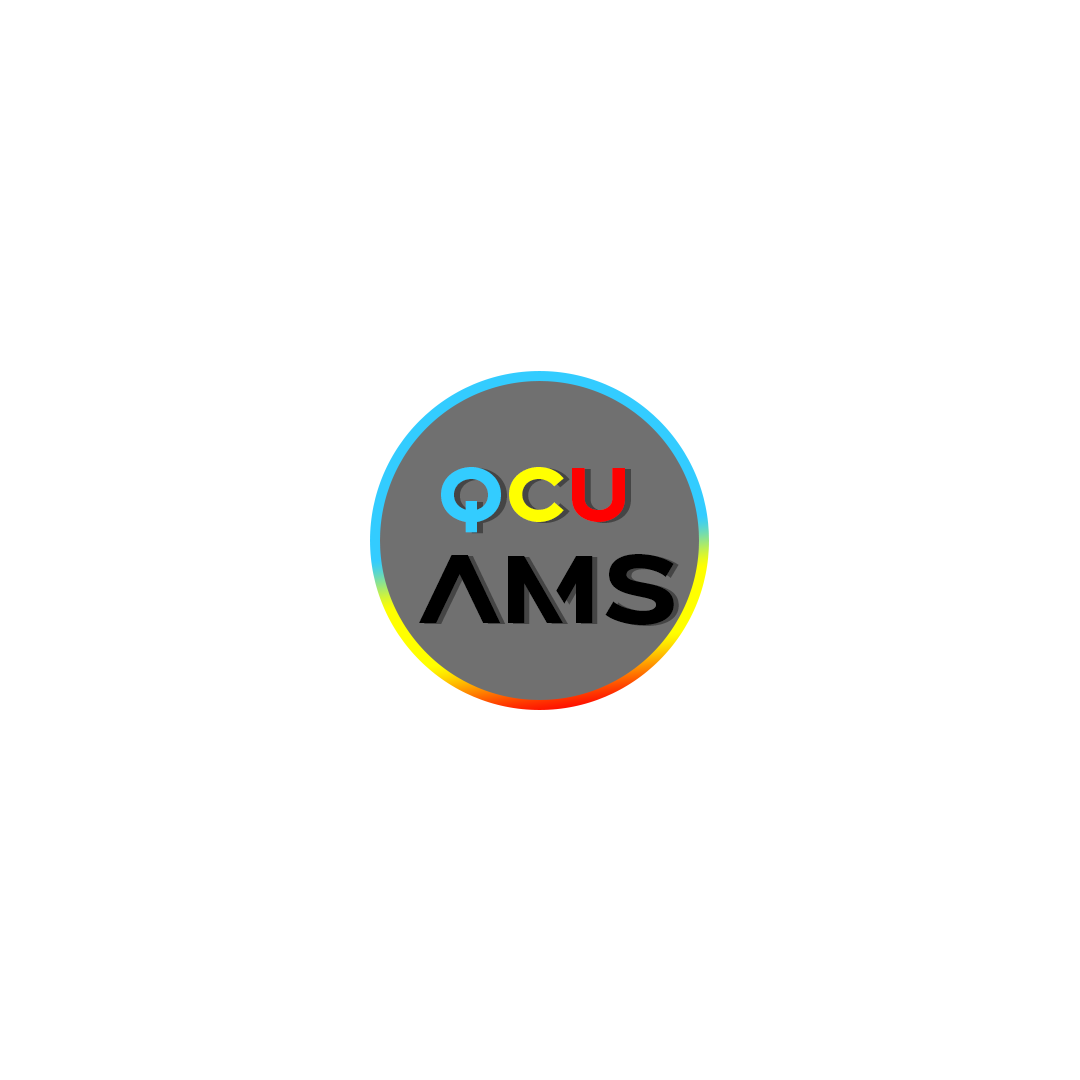
<style>
.page{position:relative;width:1080px;height:1080px;background:#ffffff}
.page>*{position:absolute;margin:0}
.t1{font:75px "Brolink-DEMO";color:#33ccff}
.t2{font:75px "Brolink-DEMO";color:#ffff00}
.t3{font:75px "Brolink-DEMO";color:#ff0000}
.t4{font:95.8px "Brolink-DEMO";color:#000000}
</style>
<div class="page">
<p class="t1" style="left:441px;top:467px;width:184px;height:66px">Q<span class="t2">C</span><span class="t3">U</span></p>
<p class="t4" style="left:419px;top:554px;width:255px;height:71px">ams</p>
</div>
